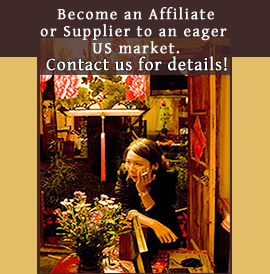
<style>
.page{position:relative;width:270px;height:274px;background:#e3bd67}
.page>*{position:absolute;margin:0}
.t1{font:16px/17px "GentiumBasic";letter-spacing:0.075em;color:#ffffff;font-weight:bold}
.t2{font:18px "GentiumBasic";letter-spacing:0.025em;color:#ffffff;font-weight:bold}
</style>
<div class="page">
<p class="t1" style="left:40px;top:7px;width:187px;height:47px;text-align:center">Become an Affiliate<br>or Supplier to an eager <br>US market.</p>
<p class="t2" style="left:46px;top:56px;width:181px;height:15px">Contact us for details!</p>
</div>
